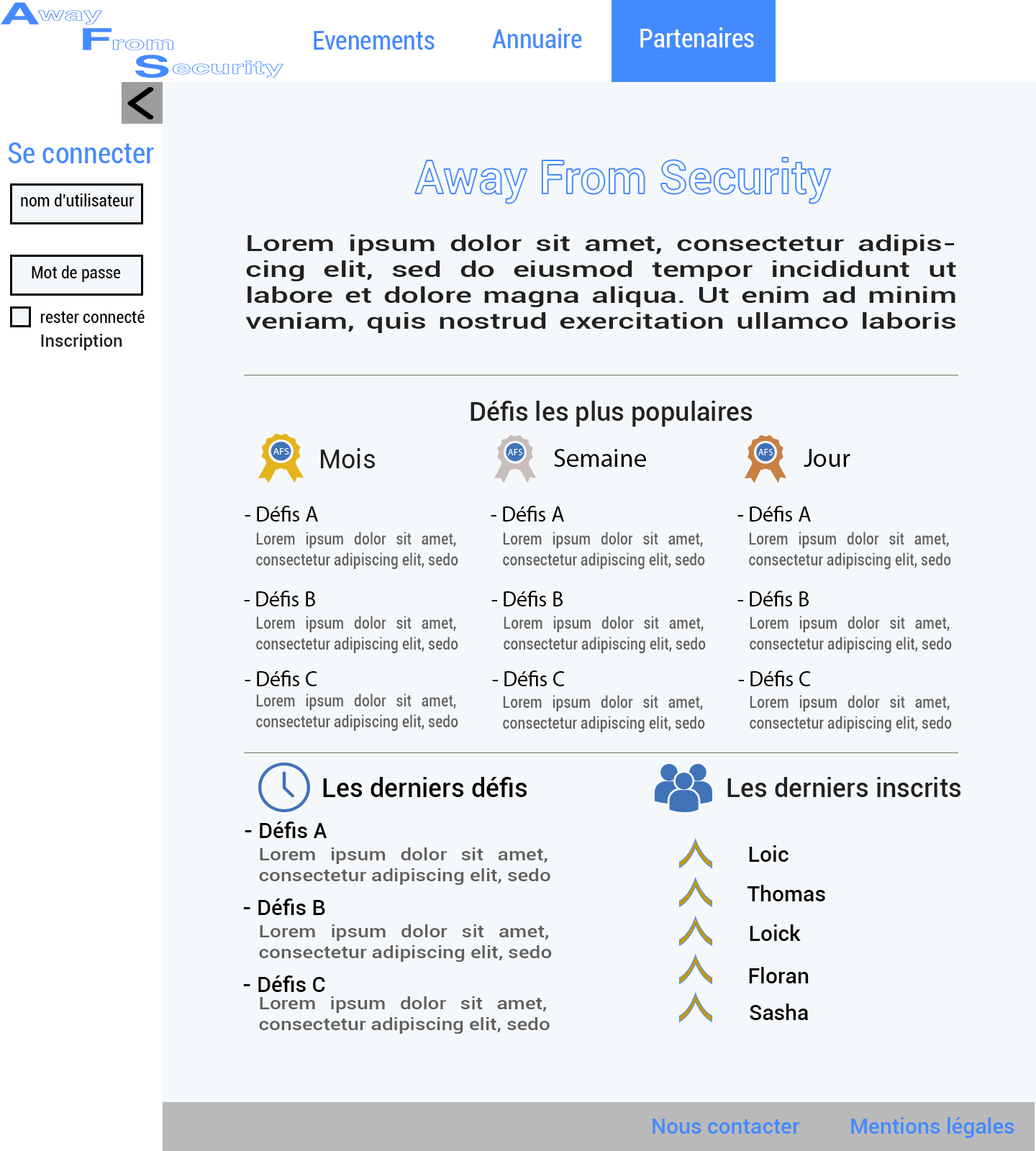
<style>
.page{position:relative;width:1036px;height:1151px;background:#f5f8fa}
.page>*{position:absolute;margin:0}
.t1{font:25.9px "Roboto-Condensed";color:#448aff}
.t2{font:25.9px "Roboto-Condensed";color:#ffffff}
.t3{font:28.8px "Roboto-Condensed";color:#448aff}
.t4{font:46.8px "Roboto-Medium";color:#ffffff}
.t5{font:17.3px "Roboto-Condensed";color:#000000}
.t6{font:21.6px "Roboto-Medium";color:#212121;scale:1.45 1}
.t7{font:17.3px "Roboto-Medium";color:#212121}
.t8{font:25.9px "Roboto-Medium";color:#212121}
.t9{font:25.9px "Roboto-Regular";color:#212121}
.t10{font:25.9px "MyriadPro-Regular";color:#010101}
.t11{font:21.6px "MyriadPro-Regular";color:#000000}
.t12{font:17.3px "Roboto-Medium";color:#5f5f5f;scale:0.81 1}
.t13{font:25.9px "Roboto-Medium";color:#000000}
.t14{font:21.6px "Roboto-Medium";color:#000000}
.t15{font:17.3px "Roboto-Medium";color:#5f5f5f;scale:1.17 1}
.t16{font:17.3px "Roboto-Medium";color:#5f5f5f;scale:1.16 1}
.t17{font:21.6px "Roboto-Medium";color:#448aff}
</style>
<div class="page">
<p class="t1" style="left:492px;top:28px;width:90px;height:20px">Annuaire</p>
<p class="t2" style="left:640px;top:27px;width:114px;height:20px">Partenaires</p>
<p class="t1" style="left:314px;top:31px;width:121px;height:19px">Evenements</p>
<p class="t3" style="left:8px;top:142px;width:146px;height:21px">Se connecter</p>
<p class="t4" style="left:415px;top:158px;width:416px;height:46px">Away From Security</p>
<p class="t5" style="left:21px;top:194px;width:113px;height:12px">nom d'utilisateur</p>
<p class="t6" style="left:245px;top:235px;width:711px;height:98px;text-align:justify">Lorem ipsum dolor sit amet, consectetur adipiscing elit, sed do eiusmod tempor incididunt ut labore et dolore magna aliqua. Ut enim ad minim veniam, quis nostrud exercitation ullamco laboris nisi ut aliquip ex ea.</p>
<p class="t5" style="left:32px;top:265px;width:89px;height:17px">Mot de passe</p>
<p class="t5" style="left:40px;top:310px;width:105px;height:13px">rester connecté</p>
<p class="t7" style="left:41px;top:334px;width:81px;height:16px">Inscription</p>
<p class="t8" style="left:470px;top:401px;width:283px;height:26px">Défis les plus populaires</p>
<p class="t9" style="left:321px;top:448px;width:54px;height:20px">Mois</p>
<p class="t10" style="left:554px;top:449px;width:92px;height:18px">Semaine</p>
<p class="t10" style="left:804px;top:449px;width:46px;height:18px">Jour</p>
<p class="t11" style="left:245px;top:506px;width:73px;height:16px">- Défis A</p>
<p class="t11" style="left:491px;top:506px;width:73px;height:16px">- Défis A</p>
<p class="t11" style="left:737px;top:506px;width:74px;height:16px">- Défis A</p>
<p class="t12" style="left:256px;top:532px;width:202px;height:37px;text-align:justify">Lorem ipsum dolor sit amet, consectetur adipiscing elit, sedo</p>
<p class="t12" style="left:503px;top:532px;width:202px;height:37px;text-align:justify">Lorem ipsum dolor sit amet, consectetur adipiscing elit, sedo</p>
<p class="t12" style="left:749px;top:532px;width:202px;height:37px;text-align:justify">Lorem ipsum dolor sit amet, consectetur adipiscing elit, sedo</p>
<p class="t11" style="left:244px;top:591px;width:71px;height:15px">- Défis B</p>
<p class="t11" style="left:491px;top:591px;width:72px;height:15px">- Défis B</p>
<p class="t11" style="left:737px;top:591px;width:72px;height:15px">- Défis B</p>
<p class="t12" style="left:256px;top:616px;width:202px;height:37px;text-align:justify">Lorem ipsum dolor sit amet, consectetur adipiscing elit, sedo</p>
<p class="t12" style="left:504px;top:616px;width:202px;height:37px;text-align:justify">Lorem ipsum dolor sit amet, consectetur adipiscing elit, sedo</p>
<p class="t12" style="left:750px;top:616px;width:202px;height:37px;text-align:justify">Lorem ipsum dolor sit amet, consectetur adipiscing elit, sedo</p>
<p class="t11" style="left:245px;top:670px;width:72px;height:16px">- Défis C</p>
<p class="t11" style="left:492px;top:670px;width:73px;height:16px">- Défis C</p>
<p class="t11" style="left:738px;top:670px;width:73px;height:16px">- Défis C</p>
<p class="t12" style="left:256px;top:694px;width:202px;height:37px;text-align:justify">Lorem ipsum dolor sit amet, consectetur adipiscing elit, sedo</p>
<p class="t12" style="left:503px;top:695px;width:202px;height:37px;text-align:justify">Lorem ipsum dolor sit amet, consectetur adipiscing elit, sedo</p>
<p class="t12" style="left:750px;top:695px;width:202px;height:37px;text-align:justify">Lorem ipsum dolor sit amet, consectetur adipiscing elit, sedo</p>
<p class="t13" style="left:323px;top:777px;width:204px;height:20px">Les derniers défis</p>
<p class="t8" style="left:727px;top:777px;width:234px;height:20px">Les derniers inscrits</p>
<p class="t14" style="left:245px;top:822px;width:82px;height:16px">- Défis A</p>
<p class="t14" style="left:749px;top:845px;width:39px;height:17px">Loic</p>
<p class="t15" style="left:259px;top:847px;width:291px;height:38px;text-align:justify">Lorem ipsum dolor sit amet, consectetur adipiscing elit, sedo</p>
<p class="t14" style="left:747px;top:885px;width:78px;height:16px">Thomas</p>
<p class="t14" style="left:243px;top:899px;width:82px;height:16px">- Défis B</p>
<p class="t15" style="left:259px;top:924px;width:293px;height:38px;text-align:justify">Lorem ipsum dolor sit amet, consectetur adipiscing elit, sedo</p>
<p class="t14" style="left:750px;top:924px;width:51px;height:17px">Loick</p>
<p class="t14" style="left:243px;top:976px;width:82px;height:16px">- Défis C</p>
<p class="t14" style="left:749px;top:967px;width:60px;height:16px">Floran</p>
<p class="t16" style="left:259px;top:996px;width:291px;height:38px;text-align:justify">Lorem ipsum dolor sit amet, consectetur adipiscing elit, sedo</p>
<p class="t14" style="left:750px;top:1004px;width:58px;height:16px">Sasha</p>
<p class="t17" style="left:653px;top:1119px;width:147px;height:15px">Nous contacter</p>
<p class="t17" style="left:851px;top:1117px;width:163px;height:21px">Mentions légales</p>
</div>
